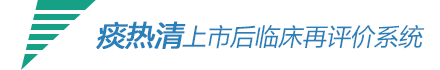
<style>
.page{position:relative;width:440px;height:70px;background:#ffffff}
.page>*{position:absolute;margin:0}
.t1{font:24px "MicrosoftYaHei";color:#2980b9;font-style:italic}
.t2{font:28px "MicrosoftYaHei";color:#2980b9;font-weight:bold;font-style:italic}
</style>
<div class="page">
<p class="t1" style="left:96px;top:21px;width:329px;height:28px"><span class="t2">痰热清</span>上市后临床再评价系统</p>
</div>
